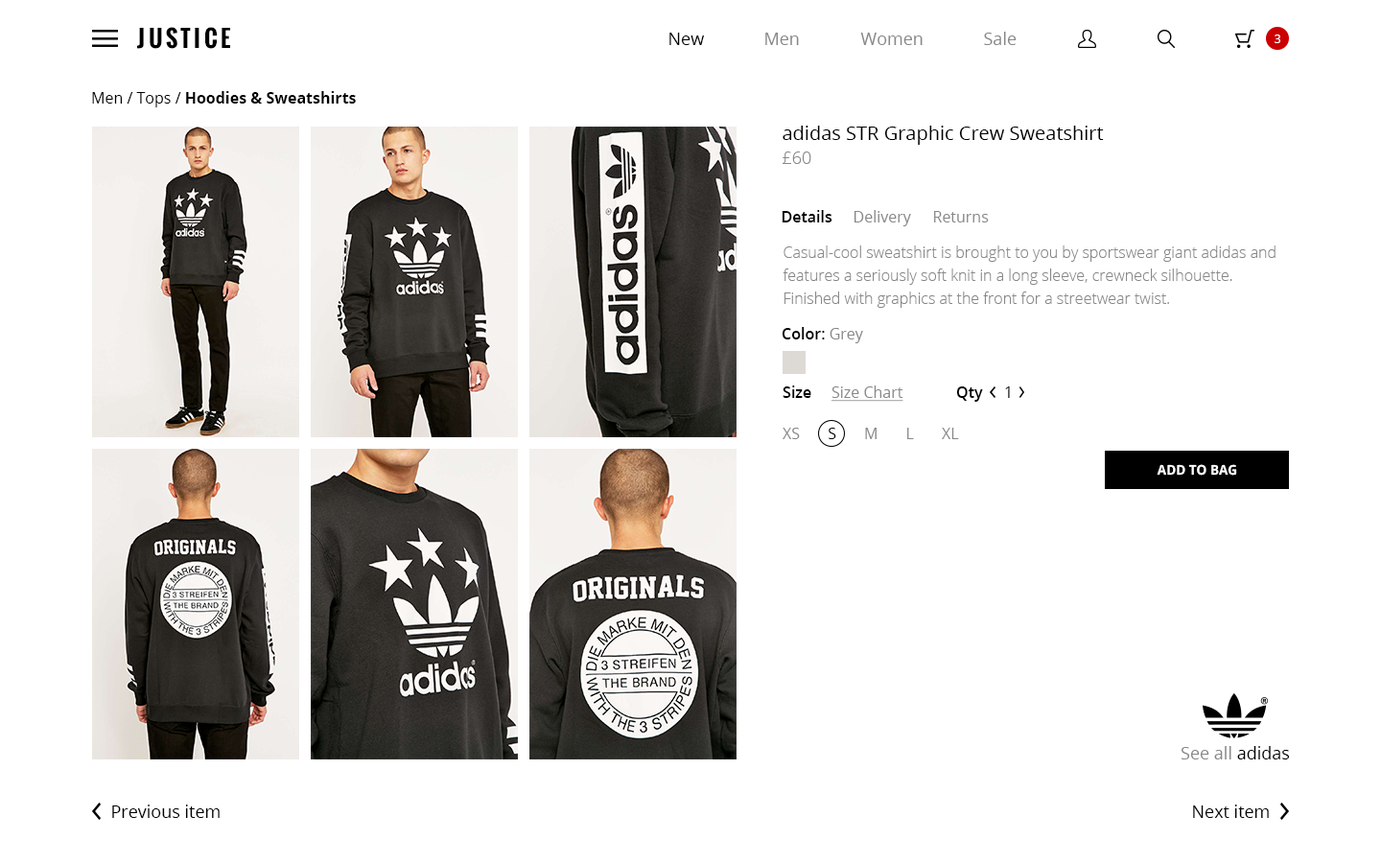
<style>
.page{position:relative;width:1381px;height:863px;background:#ffffff}
.page>*{position:absolute;margin:0}
.t1{font:23px "Oswald-Bold";letter-spacing:0.14em;color:#000000;font-variant:small-caps}
.t2{font:17.3px "OpenSans";color:#000000}
.t3{font:17.3px "OpenSans";color:#888888}
.t4{font:11.5px "OpenSans";letter-spacing:0.04em;color:#ffffff;font-variant:small-caps}
.t5{font:15.3px "OpenSans-Bold";color:#000000}
.t6{font:15.3px "OpenSans";color:#000000}
.t7{font:19.2px "OpenSans";color:#000000}
.t8{font:17.3px "OpenSans-Light";color:#888888;font-variant:small-caps}
.t9{font:15.3px "OpenSans-Semibold";color:#010101}
.t10{font:15.3px "OpenSans";color:#888888}
.t11{font:15.3px/23px "OpenSans-Light";color:#888888}
.t12{font:15.3px "OpenSans-Semibold";color:#000000}
.t13{font:15.3px "OpenSans";color:#888888;text-decoration:underline}
.t14{font:15.3px "OpenSans"}
.t15{font:15.3px "OpenSans";color:#010101}
.t16{font:13.4px "OpenSans-Bold";color:#ffffff;font-variant:small-caps;scale:0.97 1}
</style>
<div class="page">
<p class="t1" style="left:137px;top:27px;width:93px;height:22px">JUSTICE</p>
<p class="t2" style="left:670px;top:33px;width:34px;height:12px">New</p>
<p class="t3" style="left:765px;top:33px;width:34px;height:12px">Men</p>
<p class="t3" style="left:860px;top:33px;width:63px;height:12px">Women</p>
<p class="t3" style="left:984px;top:32px;width:33px;height:13px">Sale</p>
<p class="t4" style="left:1275px;top:35px;width:6px;height:8px">3</p>
<p class="t5" style="left:92px;top:91px;width:264px;height:16px"><span class="t6">Men / Tops / </span>Hoodies &amp; Sweatshirts</p>
<p class="t7" style="left:783px;top:126px;width:321px;height:19px">adidas STR Graphic Crew Sweatshirt</p>
<p class="t8" style="left:783px;top:152px;width:28px;height:12px">£60</p>
<p class="t9" style="left:782px;top:210px;width:51px;height:13px">Details</p>
<p class="t10" style="left:854px;top:210px;width:57px;height:16px">Delivery</p>
<p class="t10" style="left:934px;top:211px;width:55px;height:12px">Returns</p>
<p class="t11" style="left:783px;top:246px;width:493px;height:62px;text-align:right">Casual-cool sweatshirt is brought to you by sportswear giant adidas and <br>features a seriously soft knit in a long sleeve, crewneck silhouette. <br>Finished with graphics at the front for a streetwear twist.</p>
<p class="t12" style="left:782px;top:327px;width:81px;height:16px">Color: <span class="t10">Grey</span></p>
<p class="t13" style="left:783px;top:386px;width:121px;height:16px"><span class="t12">Size     </span>Size Chart</p>
<p class="t12" style="left:956px;top:387px;width:27px;height:15px">Qty</p>
<p class="t14" style="left:1005px;top:387px;width:5px;height:11px">1</p>
<p class="t10" style="left:783px;top:428px;width:176px;height:11px">XS       <span class="t15">S </span>      M       L       XL</p>
<p class="t16" style="left:1157px;top:464px;width:80px;height:12px">ADD TO BAG</p>
<p class="t3" style="left:1181px;top:746px;width:109px;height:14px">See all<span class="t2"> adidas</span></p>
<p class="t2" style="left:112px;top:805px;width:108px;height:13px">Previous item</p>
<p class="t2" style="left:1193px;top:805px;width:76px;height:13px">Next item</p>
</div>
